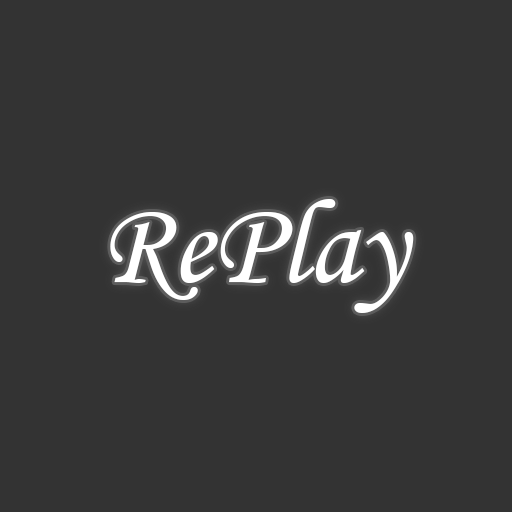
<style>
.page{position:relative;width:512px;height:512px;background:#333333}
.page>*{position:absolute;margin:0}
.t1{font:121.1px "MonotypeCorsiva";color:#ffffff}
</style>
<div class="page">
<p class="t1" style="left:110px;top:199px;width:304px;height:114px">RePlay</p>
</div>
